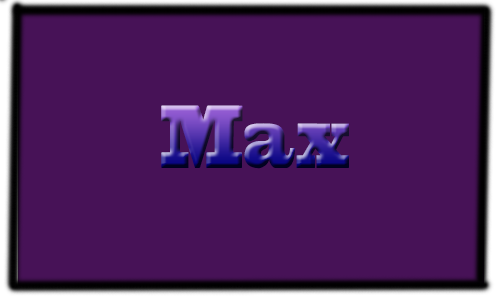
<style>
.page{position:relative;width:500px;height:300px;background:#471257}
.page>*{position:absolute;margin:0}
.t1{font:83.3px "BlackoakStd";scale:0.44 1}
</style>
<div class="page">
<p class="t1" style="left:161px;top:105px;width:188px;height:64px">Max</p>
</div>
